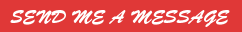
<style>
.page{position:relative;width:242px;height:32px;background:#e03837}
.page>*{position:absolute;margin:0}
.t1{font:18px "BrushScriptStd";color:#ffffff}
</style>
<div class="page">
<p class="t1" style="left:10px;top:10px;width:220px;height:17px">SEND ME A MESSAGE</p>
</div>
